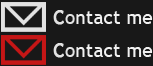
<style>
.page{position:relative;width:153px;height:66px;background:#181818}
.page>*{position:absolute;margin:0}
.t1{font:19.2px "TrebuchetMS";color:#f1f1f1}
.t2{font:19.2px "TrebuchetMS";color:#e2e2e2;font-weight:bold}
.t3{font:19.2px "TrebuchetMS";color:#e2e2e2}
</style>
<div class="page">
<p class="t1" style="left:53px;top:10px;width:100px;height:15px"><span class="t2">C</span><span class="t3">o</span>ntact me</p>
</div>
